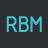
<style>
.page{position:relative;width:48px;height:48px;background:#2e2f30}
.page>*{position:absolute;margin:0}
.t1{font:30px "AirbusMCDUb";letter-spacing:-0.15em;color:#41c6d1;font-weight:bold}
</style>
<div class="page">
<p class="t1" style="left:6px;top:16px;width:36px;height:16px">rbm</p>
</div>
